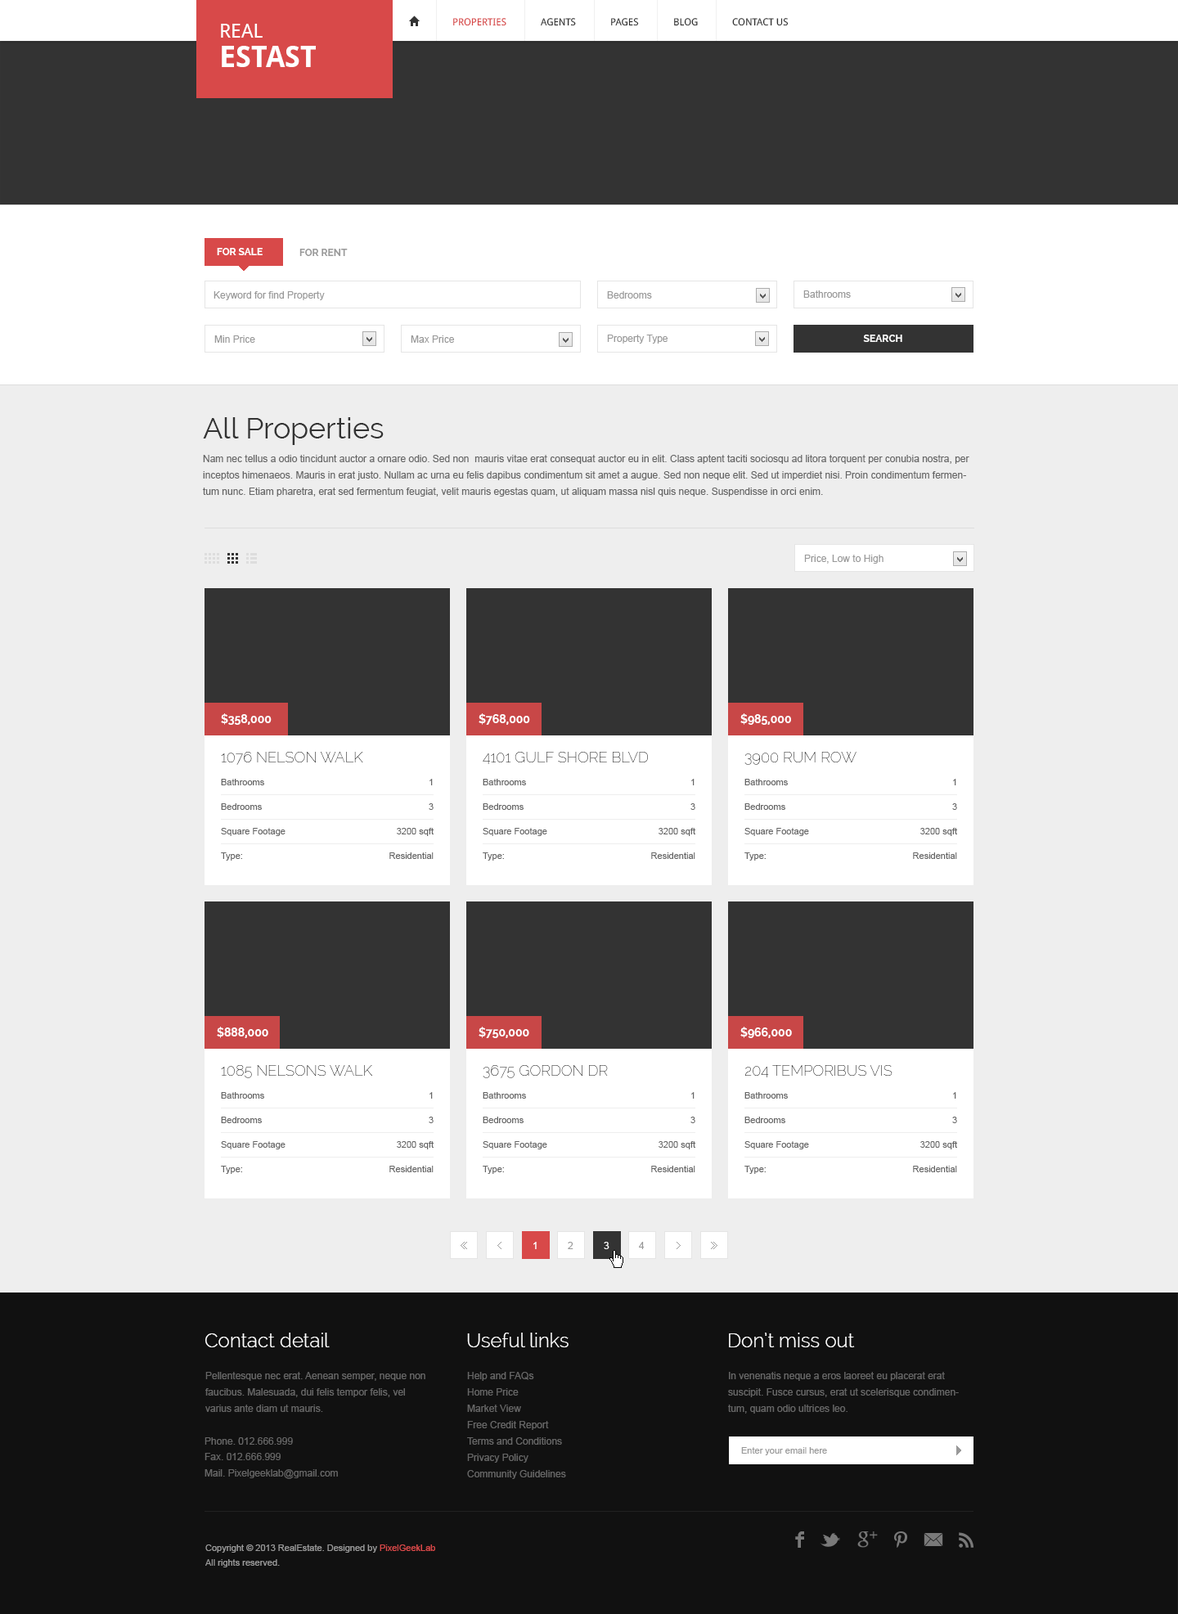
<style>
.page{position:relative;width:1178px;height:1614px;background:#eeeeee}
.page>*{position:absolute;margin:0}
.t1{font:29.5px/29.5px "DroidSans-Bold";color:#ffffff;text-transform:uppercase}
.t2{font:19.6px/29.5px "DroidSans";color:#ffffff;text-transform:uppercase}
.t3{font:9.8px "DroidSans";color:#d84949;text-transform:uppercase}
.t4{font:9.8px "DroidSans";color:#333333;text-transform:uppercase}
.t5{font:9.8px "Raleway-Bold";color:#ffffff;text-transform:uppercase}
.t6{font:9.8px "Raleway-Bold";color:#999999;text-transform:uppercase}
.t7{font:9.8px "ArialMT";color:#999999}
.t8{font:29.5px "Raleway";color:#333333}
.t9{font:9.8px/16.4px "ArialMT";color:#666666}
.t10{font:11.5px "Raleway-Bold";color:#ffffff;text-transform:uppercase}
.t11{font:14.7px "Raleway-Thin";color:#333333;text-transform:uppercase}
.t12{font:9px "ArialMT";color:#666666}
.t13{font:9.8px "ArialMT";color:#ffffff}
</style>
<div class="page">
<p class="t1" style="left:221px;top:24px;width:95px;height:43px"><span class="t2">Real <br></span>Estast</p>
<p class="t3" style="left:453px;top:18px;width:53px;height:8px">Properties</p>
<p class="t4" style="left:541px;top:18px;width:35px;height:8px">agents</p>
<p class="t4" style="left:611px;top:18px;width:28px;height:8px">pages</p>
<p class="t4" style="left:674px;top:18px;width:24px;height:8px">blog</p>
<p class="t4" style="left:732px;top:18px;width:57px;height:8px">contact us</p>
<p class="t5" style="left:217px;top:248px;width:46px;height:7px">for sale</p>
<p class="t6" style="left:299px;top:249px;width:49px;height:7px">for rent</p>
<p class="t7" style="left:214px;top:291px;width:111px;height:9px">Keyword for find Property</p>
<p class="t7" style="left:607px;top:291px;width:45px;height:8px">Bedrooms</p>
<p class="t7" style="left:803px;top:290px;width:48px;height:8px">Bathrooms</p>
<p class="t7" style="left:214px;top:335px;width:41px;height:8px">Min Price</p>
<p class="t7" style="left:411px;top:335px;width:43px;height:8px">Max Price</p>
<p class="t7" style="left:607px;top:335px;width:61px;height:9px">Property Type</p>
<p class="t5" style="left:863px;top:335px;width:39px;height:7px">search</p>
<p class="t8" style="left:203px;top:417px;width:181px;height:28px">All Properties</p>
<p class="t9" style="left:203px;top:455px;width:767px;height:42px">Nam nec tellus a odio tincidunt auctor a ornare odio. Sed non  mauris vitae erat consequat auctor eu in elit. Class aptent taciti sociosqu ad litora torquent per conubia nostra, per inceptos himenaeos. Mauris in erat justo. Nullam ac urna eu felis dapibus condimentum sit amet a augue. Sed non neque elit. Sed ut imperdiet nisi. Proin condimentum fermentum nunc. Etiam pharetra, erat sed fermentum feugiat, velit mauris egestas quam, ut aliquam massa nisl quis neque. Suspendisse in orci enim.</p>
<p class="t7" style="left:804px;top:555px;width:80px;height:9px">Price, Low to High</p>
<p class="t10" style="left:221px;top:713px;width:51px;height:12px">$358,000</p>
<p class="t10" style="left:479px;top:713px;width:51px;height:12px">$768,000</p>
<p class="t10" style="left:740px;top:713px;width:51px;height:12px">$985,000</p>
<p class="t11" style="left:221px;top:752px;width:142px;height:13px">1076 Nelson Walk</p>
<p class="t11" style="left:483px;top:752px;width:165px;height:12px">4101 Gulf Shore Blvd</p>
<p class="t11" style="left:745px;top:752px;width:112px;height:13px">3900 Rum Row</p>
<p class="t12" style="left:221px;top:779px;width:43px;height:6px">Bathrooms</p>
<p class="t12" style="left:430px;top:779px;width:3px;height:6px">1</p>
<p class="t12" style="left:483px;top:779px;width:43px;height:6px">Bathrooms</p>
<p class="t12" style="left:691px;top:779px;width:4px;height:6px">1</p>
<p class="t12" style="left:745px;top:779px;width:43px;height:6px">Bathrooms</p>
<p class="t12" style="left:953px;top:779px;width:3px;height:6px">1</p>
<p class="t12" style="left:221px;top:803px;width:41px;height:7px">Bedrooms</p>
<p class="t12" style="left:429px;top:803px;width:5px;height:7px">3</p>
<p class="t12" style="left:483px;top:803px;width:41px;height:7px">Bedrooms</p>
<p class="t12" style="left:691px;top:803px;width:4px;height:7px">3</p>
<p class="t12" style="left:745px;top:803px;width:40px;height:7px">Bedrooms</p>
<p class="t12" style="left:952px;top:803px;width:5px;height:7px">3</p>
<p class="t12" style="left:221px;top:828px;width:65px;height:8px">Square Footage</p>
<p class="t12" style="left:397px;top:828px;width:37px;height:8px">3200 sqft</p>
<p class="t12" style="left:483px;top:828px;width:64px;height:8px">Square Footage</p>
<p class="t12" style="left:659px;top:828px;width:36px;height:8px">3200 sqft</p>
<p class="t12" style="left:745px;top:828px;width:64px;height:8px">Square Footage</p>
<p class="t12" style="left:920px;top:828px;width:37px;height:8px">3200 sqft</p>
<p class="t12" style="left:221px;top:853px;width:21px;height:8px">Type:</p>
<p class="t12" style="left:389px;top:853px;width:45px;height:6px">Residential</p>
<p class="t12" style="left:483px;top:853px;width:21px;height:8px">Type:</p>
<p class="t12" style="left:651px;top:853px;width:44px;height:6px">Residential</p>
<p class="t12" style="left:745px;top:853px;width:21px;height:8px">Type:</p>
<p class="t12" style="left:913px;top:853px;width:44px;height:6px">Residential</p>
<p class="t10" style="left:217px;top:1027px;width:51px;height:11px">$888,000</p>
<p class="t10" style="left:479px;top:1027px;width:50px;height:11px">$750,000</p>
<p class="t10" style="left:740px;top:1027px;width:52px;height:11px">$966,000</p>
<p class="t11" style="left:221px;top:1065px;width:151px;height:13px">1085 Nelsons Walk</p>
<p class="t11" style="left:483px;top:1065px;width:125px;height:13px">3675 Gordon Dr</p>
<p class="t11" style="left:745px;top:1065px;width:148px;height:13px">204 temporibus vis</p>
<p class="t12" style="left:221px;top:1092px;width:43px;height:7px">Bathrooms</p>
<p class="t12" style="left:430px;top:1092px;width:3px;height:7px">1</p>
<p class="t12" style="left:483px;top:1092px;width:43px;height:7px">Bathrooms</p>
<p class="t12" style="left:691px;top:1092px;width:4px;height:7px">1</p>
<p class="t12" style="left:745px;top:1092px;width:43px;height:7px">Bathrooms</p>
<p class="t12" style="left:953px;top:1092px;width:3px;height:7px">1</p>
<p class="t12" style="left:221px;top:1117px;width:41px;height:6px">Bedrooms</p>
<p class="t12" style="left:429px;top:1117px;width:5px;height:6px">3</p>
<p class="t12" style="left:483px;top:1117px;width:41px;height:6px">Bedrooms</p>
<p class="t12" style="left:691px;top:1117px;width:4px;height:6px">3</p>
<p class="t12" style="left:745px;top:1117px;width:40px;height:6px">Bedrooms</p>
<p class="t12" style="left:952px;top:1117px;width:5px;height:6px">3</p>
<p class="t12" style="left:221px;top:1141px;width:65px;height:9px">Square Footage</p>
<p class="t12" style="left:397px;top:1141px;width:37px;height:9px">3200 sqft</p>
<p class="t12" style="left:483px;top:1141px;width:64px;height:9px">Square Footage</p>
<p class="t12" style="left:659px;top:1141px;width:36px;height:9px">3200 sqft</p>
<p class="t12" style="left:745px;top:1141px;width:64px;height:9px">Square Footage</p>
<p class="t12" style="left:920px;top:1141px;width:37px;height:9px">3200 sqft</p>
<p class="t12" style="left:221px;top:1166px;width:21px;height:8px">Type:</p>
<p class="t12" style="left:389px;top:1166px;width:45px;height:6px">Residential</p>
<p class="t12" style="left:483px;top:1166px;width:21px;height:8px">Type:</p>
<p class="t12" style="left:651px;top:1166px;width:44px;height:6px">Residential</p>
<p class="t12" style="left:745px;top:1166px;width:21px;height:8px">Type:</p>
<p class="t12" style="left:913px;top:1166px;width:44px;height:6px">Residential</p>
<p class="t13" style="left:533px;top:1242px;width:4px;height:7px">1</p>
<p class="t7" style="left:568px;top:1242px;width:6px;height:7px">2</p>
<p class="t13" style="left:604px;top:1242px;width:6px;height:7px">3</p>
<p class="t7" style="left:639px;top:1242px;width:6px;height:7px">4</p>
</div>
